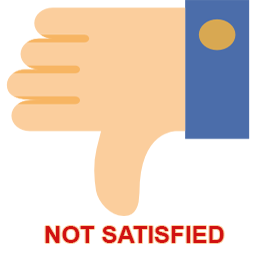
<style>
.page{position:relative;width:256px;height:256px;background:#ffffff}
.page>*{position:absolute;margin:0}
.t1{font:24px "Arial-BoldMT";color:#d11111}
</style>
<div class="page">
<p class="t1" style="left:45px;top:226px;width:179px;height:17px">NOT SATISFIED</p>
</div>
